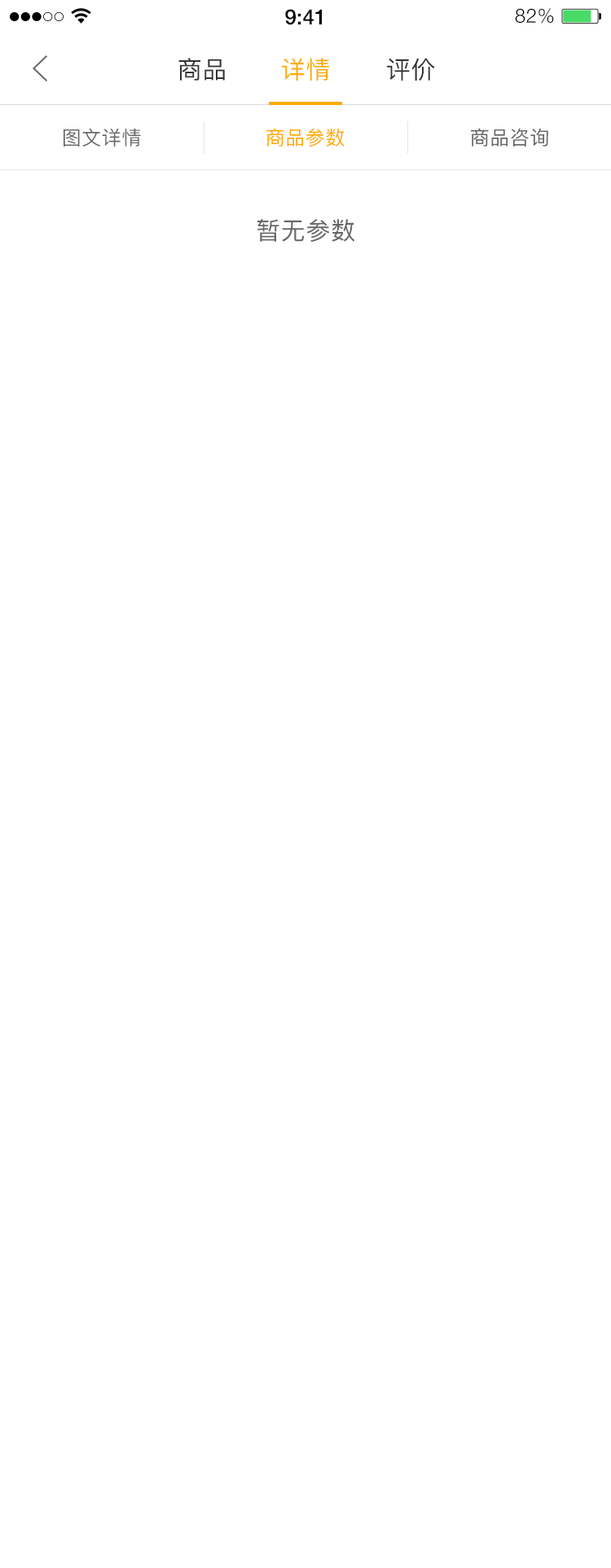
<style>
.page{position:relative;width:611px;height:1568px;background:#ffffff}
.page>*{position:absolute;margin:0}
.t1{font:21.2px "HelveticaNeue-Medium";color:#000000}
.t2{font:19.5px "HelveticaNeue-Light";letter-spacing:0.025em;color:#000000}
.t3{font:24.4px "PingFang-SC-Medium";letter-spacing:0.025em;color:#333333}
.t4{font:24.4px "PingFang-SC-Medium";letter-spacing:0.025em;color:#ffaa00}
.t5{font:19.5px "PingFang-SC-Medium";letter-spacing:0.025em;color:#666666}
.t6{font:19.5px "PingFang-SC-Medium";letter-spacing:0.025em;color:#ffaa00}
.t7{font:24.4px "PingFang-SC-Medium";letter-spacing:0.025em;color:#666666}
</style>
<div class="page">
<p class="t1" style="left:285px;top:9px;width:37px;height:16px">9:41</p>
<p class="t2" style="left:515px;top:8px;width:39px;height:16px">82%</p>
<p class="t3" style="left:178px;top:58px;width:47px;height:23px">商品</p>
<p class="t4" style="left:282px;top:58px;width:48px;height:23px">详情</p>
<p class="t3" style="left:387px;top:58px;width:48px;height:23px">评价</p>
<p class="t5" style="left:64px;top:128px;width:77px;height:19px">图文详情</p>
<p class="t6" style="left:266px;top:128px;width:78px;height:19px">商品参数</p>
<p class="t5" style="left:471px;top:128px;width:77px;height:19px">商品咨询</p>
<p class="t7" style="left:256px;top:219px;width:99px;height:23px">暂无参数</p>
</div>
